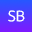
<style>
.page{position:relative;width:32px;height:32px}
.page>*{position:absolute;margin:0}
.t1{font:15px "Ubuntu-Light";color:#ffffff}
</style>
<div class="page">
<p class="t1" style="left:8px;top:10px;width:17px;height:12px">SB</p>
</div>
